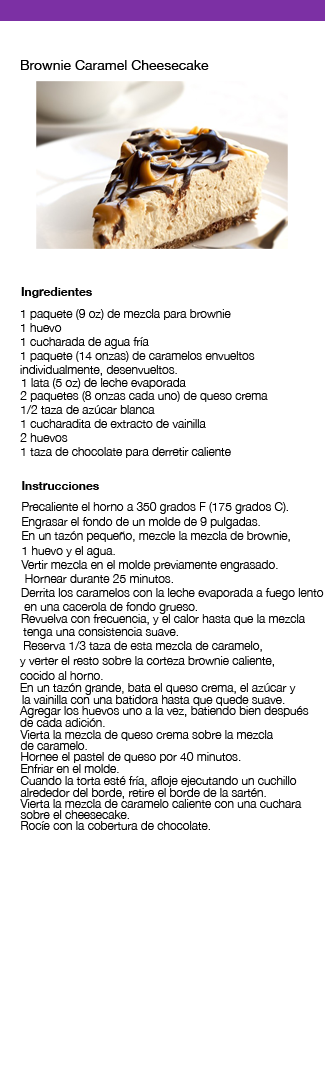
<style>
.page{position:relative;width:325px;height:1068px;background:#ffffff}
.page>*{position:absolute;margin:0}
.t1{font:14px "HelveticaNeue";color:#000000}
.t2{font:12px "HelveticaNeue-Bold";color:#000000}
.t3{font:12px "HelveticaNeue-Light";color:#000000}
</style>
<div class="page">
<p class="t1" style="left:21px;top:60px;width:188px;height:10px">Brownie Caramel Cheesecake</p>
<p class="t2" style="left:21px;top:287px;width:71px;height:11px">Ingredientes</p>
<p class="t3" style="left:21px;top:309px;width:210px;height:11px">1 paquete (9 oz) de mezcla para brownie</p>
<p class="t3" style="left:21px;top:323px;width:41px;height:9px">1 huevo</p>
<p class="t3" style="left:21px;top:337px;width:128px;height:12px">1 cucharada de agua fría</p>
<p class="t3" style="left:21px;top:351px;width:234px;height:11px">1 paquete (14 onzas) de caramelos envueltos</p>
<p class="t3" style="left:20px;top:365px;width:157px;height:11px">individualmente, desenvueltos.</p>
<p class="t3" style="left:22px;top:378px;width:164px;height:11px">1 lata (5 oz) de leche evaporada</p>
<p class="t3" style="left:20px;top:391px;width:248px;height:11px">2 paquetes (8 onzas cada uno) de queso crema</p>
<p class="t3" style="left:21px;top:405px;width:134px;height:9px">1/2 taza de azúcar blanca</p>
<p class="t3" style="left:21px;top:419px;width:185px;height:9px">1 cucharadita de extracto de vainilla</p>
<p class="t3" style="left:20px;top:433px;width:48px;height:9px">2 huevos</p>
<p class="t3" style="left:21px;top:447px;width:210px;height:11px">1 taza de chocolate para derretir caliente</p>
<p class="t2" style="left:22px;top:481px;width:77px;height:9px">Instrucciones</p>
<p class="t3" style="left:22px;top:502px;width:266px;height:12px">Precaliente el horno a 350 grados F (175 grados C).</p>
<p class="t3" style="left:22px;top:517px;width:238px;height:12px">Engrasar el fondo de un molde de 9 pulgadas.</p>
<p class="t3" style="left:22px;top:531px;width:268px;height:11px">En un tazón pequeño, mezcle la mezcla de brownie,</p>
<p class="t3" style="left:22px;top:546px;width:93px;height:12px">1 huevo y el agua.</p>
<p class="t3" style="left:21px;top:560px;width:257px;height:12px">Vertir mezcla en el molde previamente engrasado.</p>
<p class="t3" style="left:25px;top:574px;width:148px;height:9px">Hornear durante 25 minutos.</p>
<p class="t3" style="left:21px;top:588px;width:303px;height:12px">Derrita los caramelos con la leche evaporada a fuego lento</p>
<p class="t3" style="left:24px;top:602px;width:173px;height:12px">en una cacerola de fondo grueso.</p>
<p class="t3" style="left:21px;top:614px;width:284px;height:11px">Revuelva con frecuencia, y el calor hasta que la mezcla</p>
<p class="t3" style="left:23px;top:627px;width:155px;height:12px">tenga una consistencia suave.</p>
<p class="t3" style="left:24px;top:641px;width:238px;height:11px">Reserva 1/3 taza de esta mezcla de caramelo,</p>
<p class="t3" style="left:19px;top:656px;width:255px;height:11px">y verter el resto sobre la corteza brownie caliente,</p>
<p class="t3" style="left:20px;top:671px;width:83px;height:9px">cocido al horno.</p>
<p class="t3" style="left:20px;top:683px;width:276px;height:12px">En un tazón grande, bata el queso crema, el azúcar y</p>
<p class="t3" style="left:22px;top:695px;width:263px;height:11px">la vainilla con una batidora hasta que quede suave.</p>
<p class="t3" style="left:19px;top:706px;width:290px;height:12px">Agregar los huevos uno a la vez, batiendo bien después</p>
<p class="t3" style="left:20px;top:718px;width:85px;height:9px">de cada adición.</p>
<p class="t3" style="left:20px;top:730px;width:253px;height:11px">Vierta la mezcla de queso crema sobre la mezcla</p>
<p class="t3" style="left:20px;top:741px;width:67px;height:9px">de caramelo.</p>
<p class="t3" style="left:21px;top:752px;width:220px;height:11px">Hornee el pastel de queso por 40 minutos.</p>
<p class="t3" style="left:21px;top:764px;width:98px;height:9px">Enfriar en el molde.</p>
<p class="t3" style="left:20px;top:776px;width:277px;height:11px">Cuando la torta esté fría, afloje ejecutando un cuchillo</p>
<p class="t3" style="left:20px;top:788px;width:246px;height:11px">alrededor del borde, retire el borde de la sartén.</p>
<p class="t3" style="left:20px;top:799px;width:282px;height:9px">Vierta la mezcla de caramelo caliente con una cuchara</p>
<p class="t3" style="left:20px;top:810px;width:109px;height:9px">sobre el cheesecake.</p>
<p class="t3" style="left:21px;top:821px;width:189px;height:9px">Rocíe con la cobertura de chocolate.</p>
</div>
